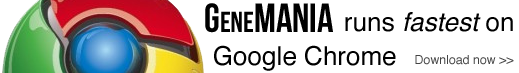
<style>
.page{position:relative;width:519px;height:73px;background:#ffffff}
.page>*{position:absolute;margin:0}
.t1{font:40.6px "BebasNeue";color:#000000}
.t2{font:29px "BebasNeue";color:#000000}
.t3{font:26px "Helvetica-Oblique";color:#000000}
.t4{font:26px "Helvetica";color:#000000}
.t5{font:12.4px "Helvetica";color:#434343}
</style>
<div class="page">
<p class="t1" style="left:205px;top:3px;width:128px;height:30px">G<span class="t2">ene</span>MANIA</p>
<p class="t3" style="left:345px;top:12px;width:168px;height:20px"><span class="t4">runs </span>fastest<span class="t4"> on</span></p>
<p class="t4" style="left:214px;top:45px;width:182px;height:26px">Google Chrome</p>
<p class="t5" style="left:415px;top:55px;width:99px;height:10px">Download now &gt;&gt;</p>
</div>
